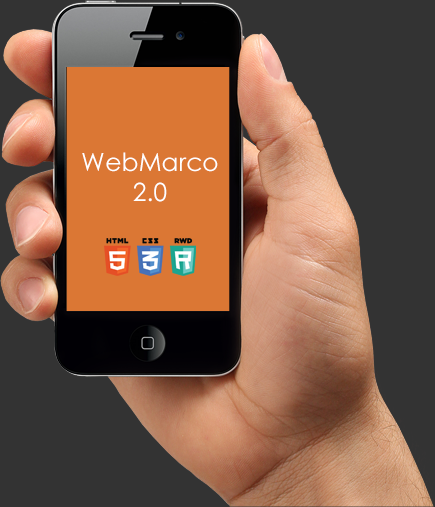
<style>
.page{position:relative;width:435px;height:507px;background:#333333}
.page>*{position:absolute;margin:0}
.t1{font:25px "CenturyGothic";color:#ffffff}
</style>
<div class="page">
<p class="t1" style="left:82px;top:152px;width:136px;height:50px;text-align:center">WebMarco<br>2.0</p>
</div>
